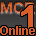
<style>
.page{position:relative;width:36px;height:36px;background:#d85d28}
.page>*{position:absolute;margin:0}
.t1{font:15px "Arial-BoldMT"}
.t2{font:12px "Arial-BoldMT";color:#d85d28}
</style>
<div class="page">
<p class="t1" style="left:1px;top:2px;width:34px;height:11px">MCR</p>
<p class="t2" style="left:0px;top:26px;width:35px;height:9px">Online</p>
</div>
